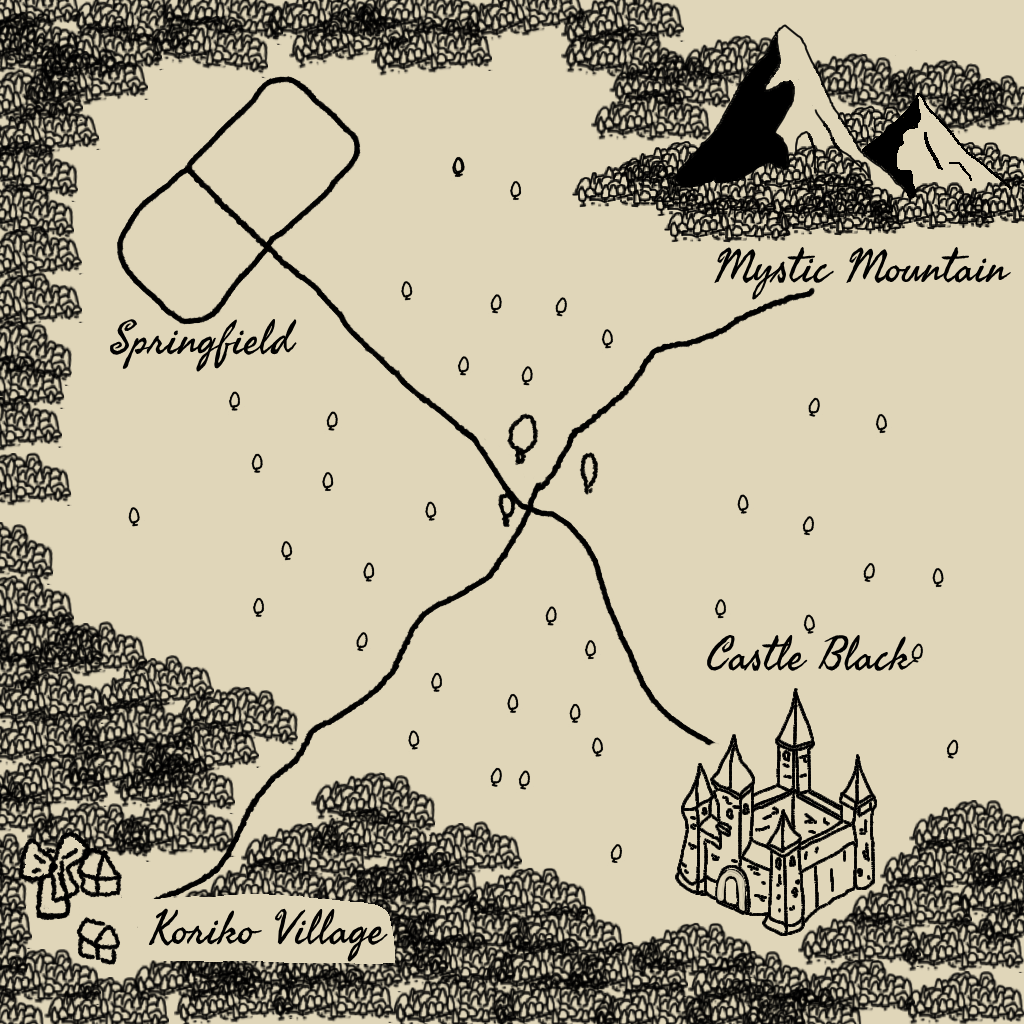
<style>
.page{position:relative;width:1024px;height:1024px;background:#e0d6b9}
.page>*{position:absolute;margin:0}
.t1{font:46px "Fasthand-Regular";color:#010100}
.t2{font:46px "Fasthand-Regular";color:#000000}
</style>
<div class="page">
<p class="t1" style="left:714px;top:246px;width:297px;height:54px">Mystic Mountain</p>
<p class="t1" style="left:110px;top:318px;width:187px;height:54px">Springfield</p>
<p class="t1" style="left:707px;top:634px;width:208px;height:37px">Castle Black</p>
<p class="t1" style="left:148px;top:908px;width:240px;height:54px"><span class="t2">K</span>oriko Village</p>
</div>
